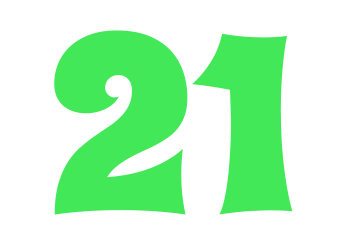
<style>
.page{position:relative;width:354px;height:236px;background:#ffffff}
.page>*{position:absolute;margin:0}
.t1{font:250px "SpicyRice-Regular";color:#43e858}
</style>
<div class="page">
<p class="t1" style="left:54px;top:30px;width:239px;height:185px">21</p>
</div>
